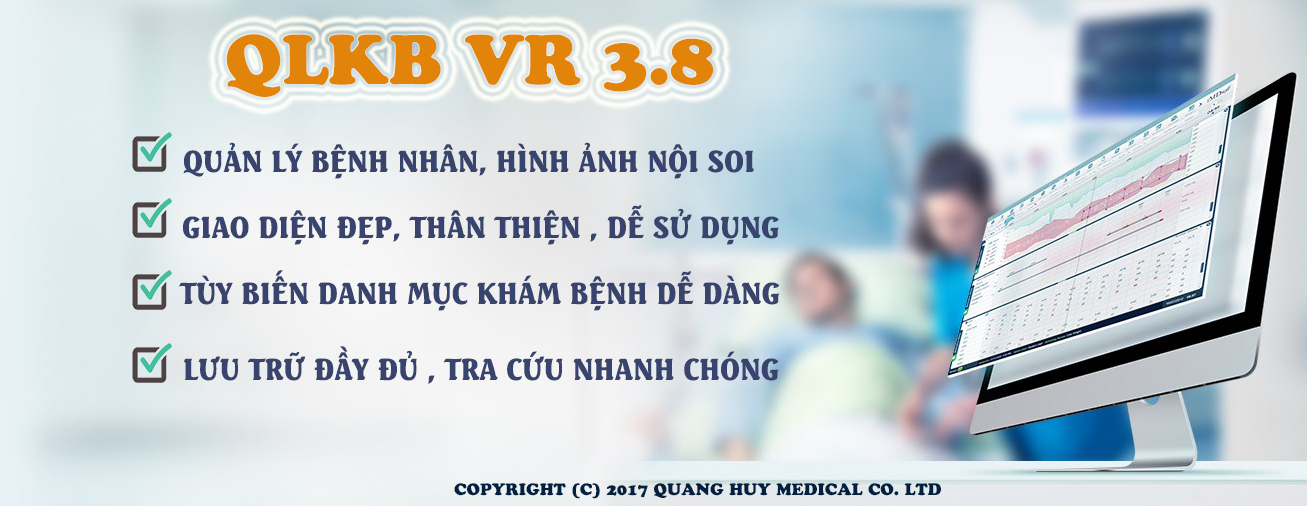
<style>
.page{position:relative;width:1307px;height:506px}
.page>*{position:absolute;margin:0}
.t1{font:73.3px "UTM-Cooper-Black";color:#e2840a}
.t2{font:29.3px "UTMSeagullBold";color:#38446d}
.t3{font:17.3px "UTM-Cooper-Black";color:#022141}
</style>
<div class="page">
<p class="t1" style="left:226px;top:34px;width:488px;height:63px">QLKB VR 3.8</p>
<p class="t2" style="left:183px;top:142px;width:571px;height:37px">QUẢN LÝ BỆNH NHÂN, HÌNH ẢNH NỘI SOI</p>
<p class="t2" style="left:183px;top:205px;width:596px;height:40px">GIAO DIỆN ĐẸP, THÂN THIỆN , DỄ SỬ DỤNG</p>
<p class="t2" style="left:179px;top:270px;width:601px;height:41px">TÙY BIẾN DANH MỤC KHÁM BỆNH DỄ DÀNG</p>
<p class="t2" style="left:184px;top:346px;width:595px;height:38px">LƯU TRỮ ĐẦY ĐỦ , TRA CỨU NHANH CHÓNG</p>
<p class="t3" style="left:454px;top:483px;width:487px;height:16px">COPYRIGHT (C) 2017 QUANG HUY MEDICAL CO. LTD</p>
</div>
